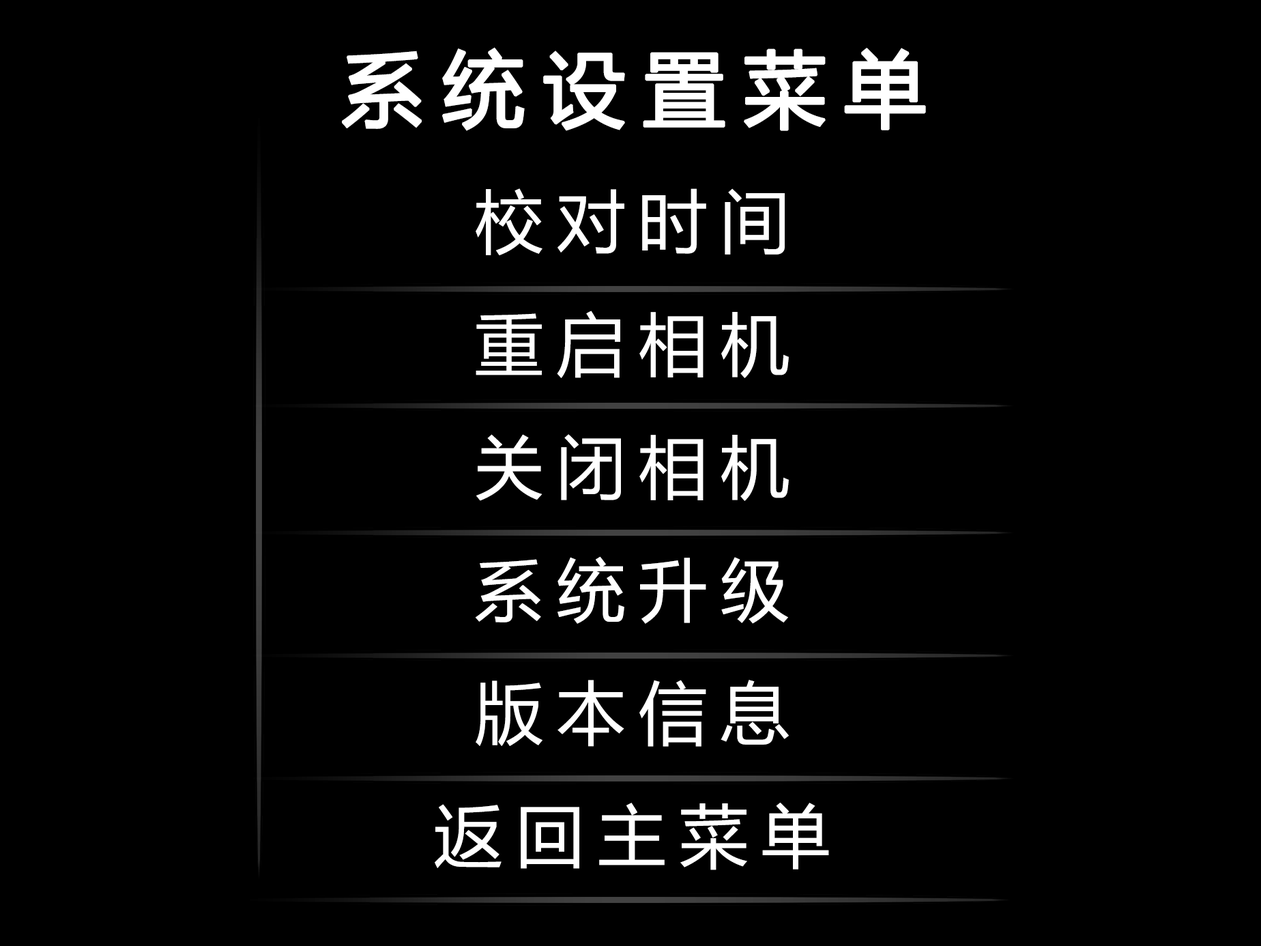
<style>
.page{position:relative;width:1261px;height:946px;background:#000000}
.page>*{position:absolute;margin:0}
.t1{font:81.9px "MicrosoftYaHei";letter-spacing:0.2em;color:#ffffff;font-weight:bold}
.t2{font:68.2px/122.8px "MicrosoftYaHei";letter-spacing:0.2em;color:#ffffff}
</style>
<div class="page">
<p class="t1" style="left:342px;top:47px;width:584px;height:84px">系统设置菜单</p>
<p class="t2" style="left:435px;top:188px;width:394px;height:682px;text-align:center">校对时间<br>重启相机<br>关闭相机<br>系统升级<br>版本信息<br>返回主菜单</p>
</div>
